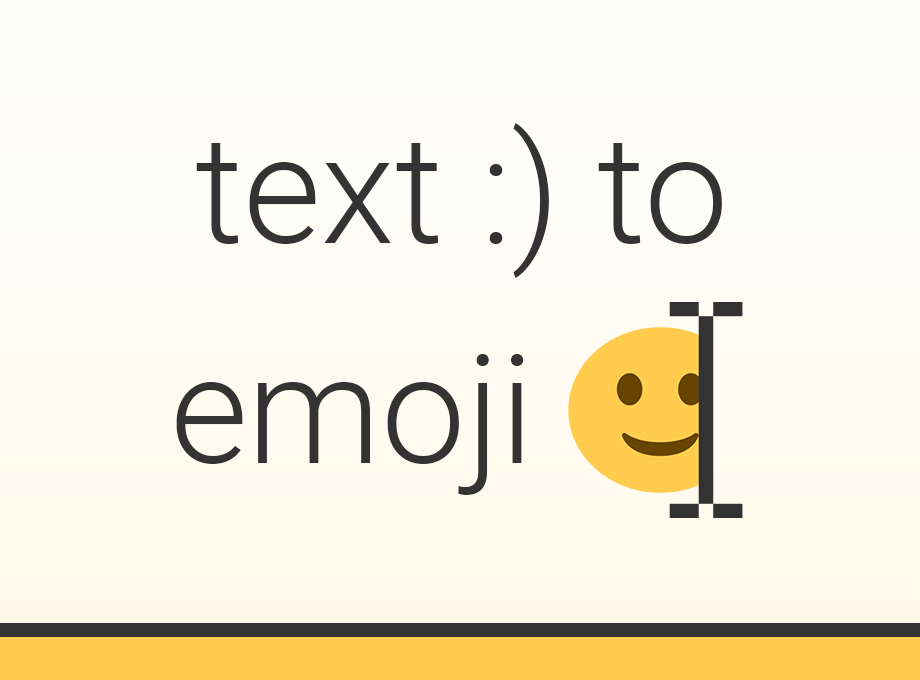
<style>
.page{position:relative;width:920px;height:680px}
.page>*{position:absolute;margin:0}
.t1{font:150.7px/220px "Roboto-Light";color:#333333}
</style>
<div class="page">
<p class="t1" style="left:176px;top:123px;width:546px;height:372px;text-align:center">text :) to<br>emoji</p>
</div>
